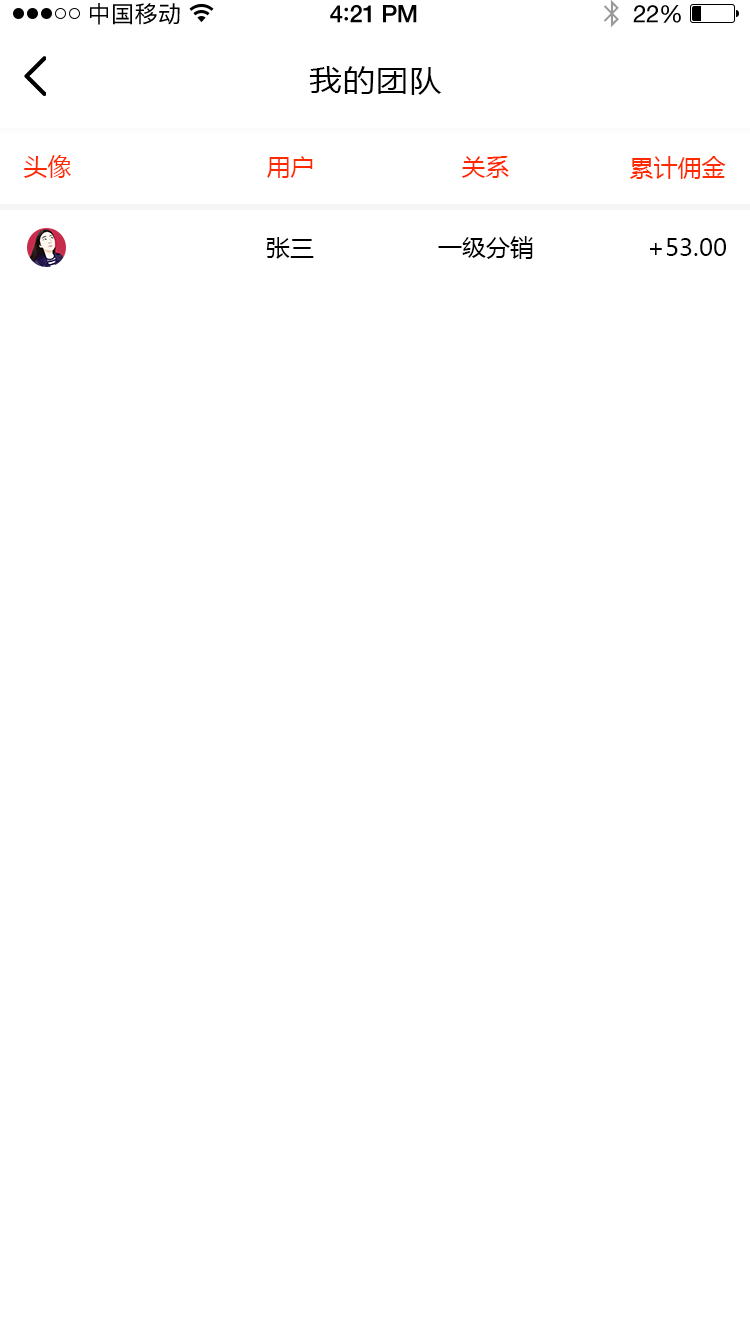
<style>
.page{position:relative;width:750px;height:1334px;background:#ffffff}
.page>*{position:absolute;margin:0}
.t1{font:23px "PingFangSC-Regular";letter-spacing:0.02em;color:#000000}
.t2{font:24px "HelveticaNeue-Medium";letter-spacing:-0.02em;color:#000000}
.t3{font:26px "Avenir-Medium";letter-spacing:-0.02em;color:#000000}
.t4{font:24px "HelveticaNeue";letter-spacing:-0.02em;color:#000000}
.t5{font:30px "MicrosoftYaHei";letter-spacing:0.05em;color:#000000;scale:1.06 1}
.t6{font:24px "MicrosoftYaHei";color:#ff2a00;text-transform:uppercase}
.t7{font:24px "MicrosoftYaHei";color:#000000;text-transform:uppercase}
</style>
<div class="page">
<p class="t1" style="left:90px;top:3px;width:90px;height:22px">中国移动</p>
<p class="t2" style="left:330px;top:5px;width:87px;height:18px">4<span class="t3">:</span>21 PM</p>
<p class="t4" style="left:633px;top:5px;width:48px;height:18px">22%</p>
<p class="t5" style="left:309px;top:66px;width:133px;height:29px">我的团队</p>
<p class="t6" style="left:24px;top:155px;width:47px;height:23px">头像</p>
<p class="t6" style="left:267px;top:156px;width:46px;height:22px">用户</p>
<p class="t6" style="left:462px;top:155px;width:47px;height:23px">关系</p>
<p class="t6" style="left:630px;top:156px;width:96px;height:23px">累计佣金</p>
<p class="t7" style="left:266px;top:237px;width:48px;height:22px">张三</p>
<p class="t7" style="left:438px;top:236px;width:95px;height:23px">一级分销</p>
<p class="t7" style="left:650px;top:238px;width:76px;height:18px">+53.00</p>
</div>
